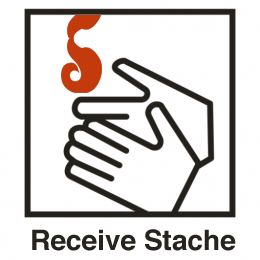
<style>
.page{position:relative;width:260px;height:260px;background:#ffffff}
.page>*{position:absolute;margin:0}
.t1{font:28px "Helvetica-Bold";color:#272420}
</style>
<div class="page">
<p class="t1" style="left:32px;top:229px;width:204px;height:22px">Receive Stache</p>
</div>
